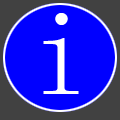
<style>
.page{position:relative;width:120px;height:120px;background:#0000ff}
.page>*{position:absolute;margin:0}
.t1{font:120px "SimSun";color:#ffffff}
</style>
<div class="page">
<p class="t1" style="left:43px;top:13px;width:36px;height:81px">i</p>
</div>
